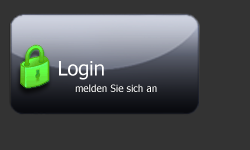
<style>
.page{position:relative;width:250px;height:150px;background:#333333}
.page>*{position:absolute;margin:0}
.t1{font:19.9px "Tahoma";color:#ffffff}
.t2{font:10px "Tahoma";color:#ffffff}
</style>
<div class="page">
<p class="t1" style="left:59px;top:61px;width:45px;height:19px">Login</p>
<p class="t2" style="left:75px;top:84px;width:82px;height:8px">melden Sie sich an</p>
</div>
